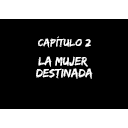
<style>
.page{position:relative;width:128px;height:128px;background:#000000}
.page>*{position:absolute;margin:0}
.t1{font:10.7px "EdoSZ";color:#ffffff;scale:1.05 1}
.t2{font:12.3px/11.8px "EdoSZ";color:#ffffff}
</style>
<div class="page">
<p class="t1" style="left:38px;top:36px;width:53px;height:12px">Capítulo 2</p>
<p class="t2" style="left:36px;top:56px;width:57px;height:23px;text-align:center">la mujer <br>destinada</p>
</div>
